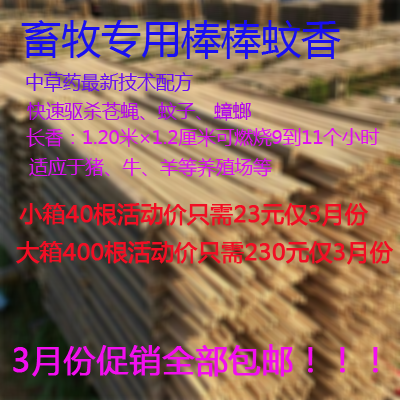
<style>
.page{position:relative;width:400px;height:400px}
.page>*{position:absolute;margin:0}
.t1{font:40px "MicrosoftYaHei";color:#190ef2}
.t2{font:18.7px "MicrosoftYaHei";color:#690ef2}
.t3{font:18.7px "MicrosoftYaHei";color:#b306ec}
.t4{font:18.7px "MicrosoftYaHei";color:#df0ef2}
.t5{font:18.7px "MicrosoftYaHei";color:#da0ef2}
.t6{font:22.7px "MicrosoftYaHei";color:#f20e24;font-weight:bold}
.t7{font:32px "MicrosoftYaHei";color:#f20eef;font-weight:bold}
</style>
<div class="page">
<p class="t1" style="left:21px;top:20px;width:320px;height:39px">畜牧专用棒棒蚊香</p>
<p class="t2" style="left:26px;top:72px;width:167px;height:20px">中草药最新技术配方</p>
<p class="t3" style="left:27px;top:102px;width:224px;height:19px">快速驱杀苍蝇、蚊子、蟑螂</p>
<p class="t4" style="left:26px;top:128px;width:354px;height:19px">长香：1.20米×1.2厘米可燃烧9到11个小时</p>
<p class="t5" style="left:29px;top:157px;width:243px;height:20px">适应于猪、牛、羊等养殖场等</p>
<p class="t6" style="left:19px;top:203px;width:349px;height:24px">小箱40根活动价只需23元仅3月份</p>
<p class="t6" style="left:16px;top:241px;width:377px;height:24px">大箱400根活动价只需230元仅3月份</p>
<p class="t7" style="left:13px;top:344px;width:365px;height:33px">3月份促销全部包邮！！！</p>
</div>
